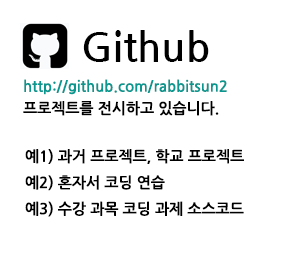
<style>
.page{position:relative;width:300px;height:280px;background:#ffffff}
.page>*{position:absolute;margin:0}
.t1{font:40px "NanumGothicBold";color:#000000}
.t2{font:15px "NanumGothicBold";color:#0a978f}
.t3{font:15px "NanumGothicBold";color:#000000}
</style>
<div class="page">
<p class="t1" style="left:83px;top:30px;width:126px;height:32px">Github</p>
<p class="t2" style="left:24px;top:79px;width:203px;height:16px">http://github.com/rabbitsun2</p>
<p class="t3" style="left:23px;top:101px;width:196px;height:15px">프로젝트를 전시하고 있습니다.</p>
<p class="t3" style="left:25px;top:149px;width:219px;height:68px">예1) 과거 프로젝트, 학교 프로젝트<br>예2) 혼자서 코딩 연습<br>예3) 수강 과목 코딩 과제 소스코드</p>
</div>
